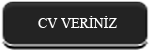
<style>
.page{position:relative;width:150px;height:50px;background:#232323}
.page>*{position:absolute;margin:0}
.t1{font:14px "TimesNewRomanPSMT";color:#ffffff}
</style>
<div class="page">
<p class="t1" style="left:38px;top:16px;width:79px;height:12px">CV VERİNİZ</p>
</div>
